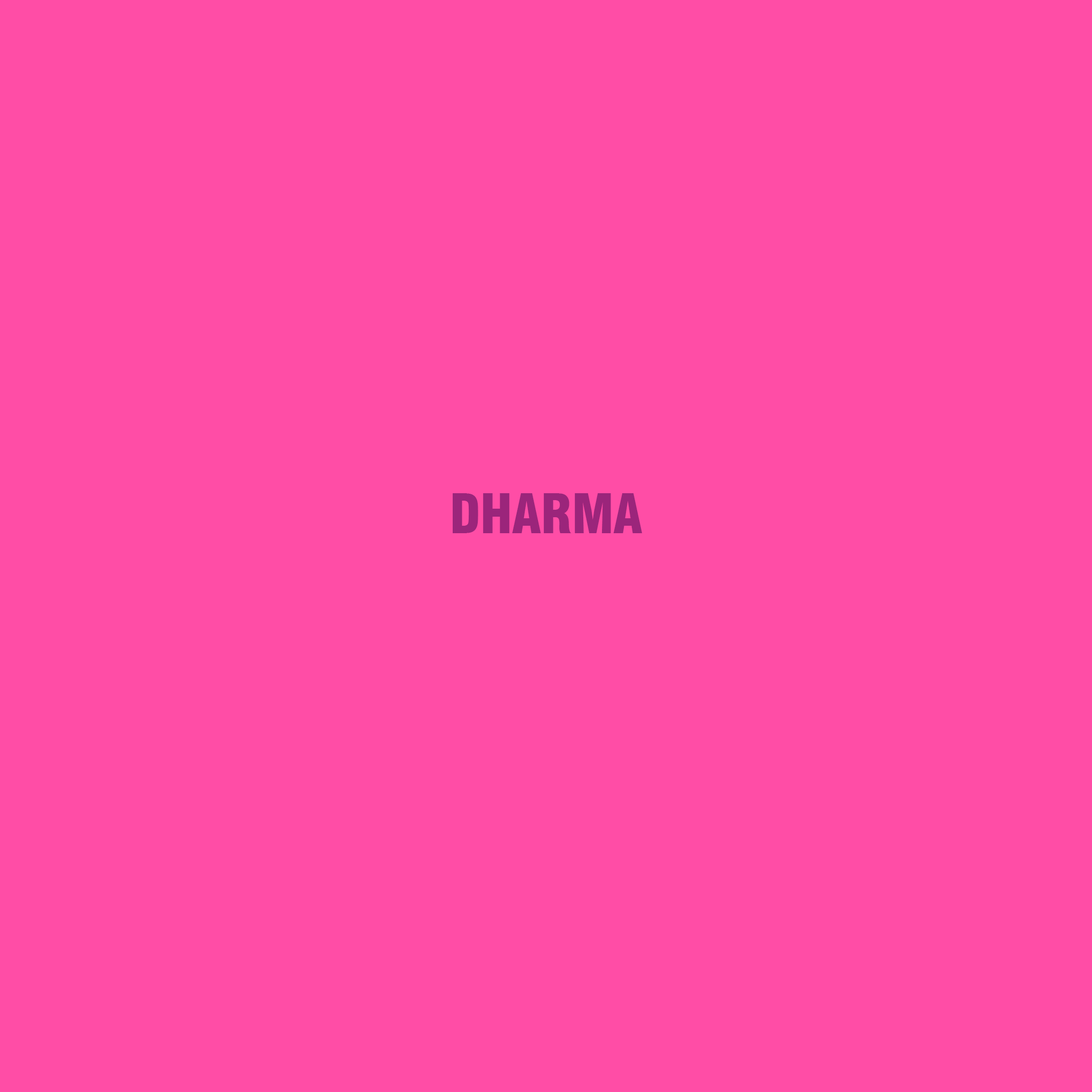
<style>
.page{position:relative;width:1092px;height:1092px;background:#ff4da6}
.page>*{position:absolute;margin:0}
.t1{font:53.3px "Swiss721BT-BlackCondensed";letter-spacing:-0.01em;color:#9b257b}
</style>
<div class="page">
<p class="t1" style="left:453px;top:493px;width:190px;height:40px">DHARMA</p>
</div>
